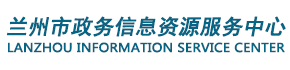
<style>
.page{position:relative;width:290px;height:70px;background:#ffffff}
.page>*{position:absolute;margin:0}
.t1{font:21px "SimHei";letter-spacing:-0.005em;color:#066585;font-weight:bold;font-style:italic}
.t2{font:12px "MicrosoftYaHei";color:#066585;font-weight:bold;scale:1.06 1}
</style>
<div class="page">
<p class="t1" style="left:7px;top:16px;width:279px;height:21px">兰州市政务信息资源服务中心</p>
<p class="t2" style="left:8px;top:42px;width:277px;height:11px">LANZHOU INFORMATION SERVICE CENTER</p>
</div>
